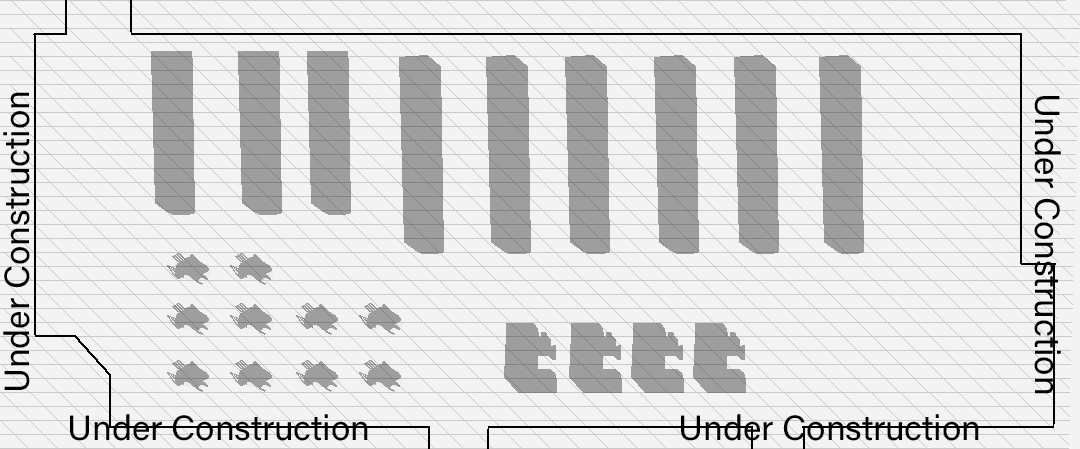
<style>
.page{position:relative;width:1080px;height:449px;background:#f3f3f3}
.page>*{position:absolute;margin:0}
.t1{font:35.1px "AcuminConcept-Regular";color:#000000}
</style>
<div class="page">
<p class="t1" style="left:3px;top:92px;width:27px;height:298px;rotate:-90deg">Under Construction</p>
<p class="t1" style="left:1034px;top:96px;width:27px;height:298px;rotate:90deg">Under Construction</p>
<p class="t1" style="left:70px;top:414px;width:298px;height:27px">Under Construction</p>
<p class="t1" style="left:681px;top:414px;width:298px;height:27px">Under Construction</p>
</div>
